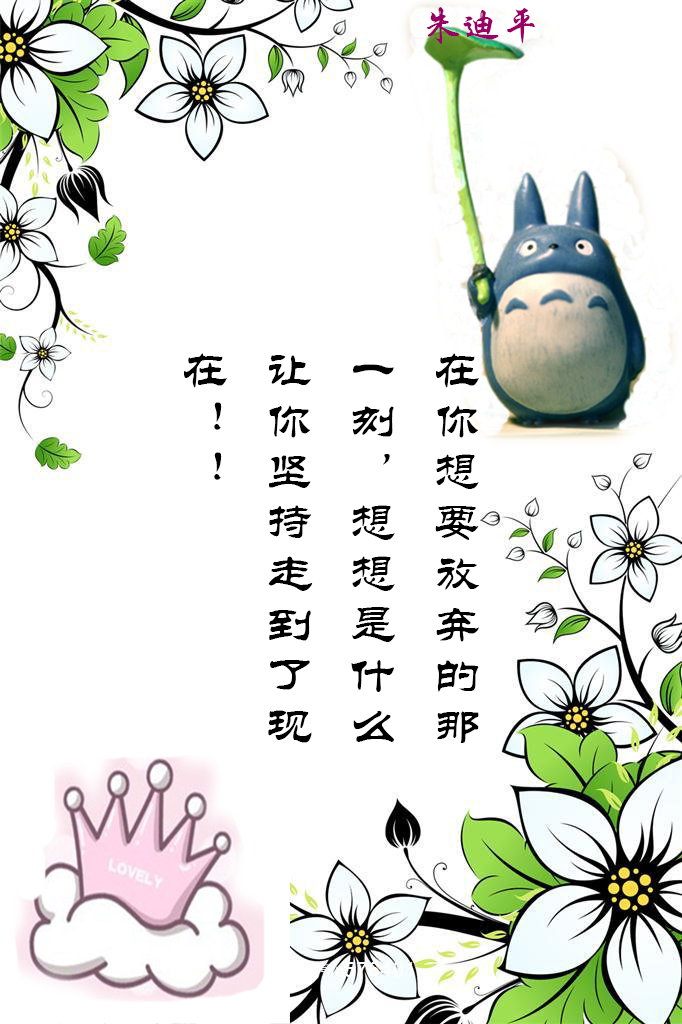
<style>
.page{position:relative;width:682px;height:1024px;background:#ffffff}
.page>*{position:absolute;margin:0}
.t1{font:40px "STXingkai";color:#990066}
.t2{font:48px "STLiti";color:#000000}
</style>
<div class="page">
<p class="t1" style="left:427px;top:7px;width:108px;height:37px">朱迪平</p>
<p class="t2" style="left:184px;top:353px;width:296px;height:390px">在你想要放弃的那一刻，想想是什么让你坚持走到了现在！！</p>
</div>
